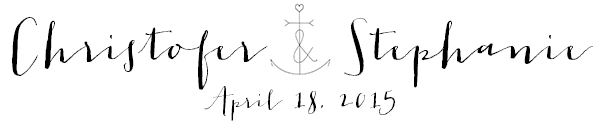
<style>
.page{position:relative;width:600px;height:121px;background:#ffffff}
.page>*{position:absolute;margin:0}
.t1{font:51.6px "JacquesGilles";color:#000000}
.t2{font:25.8px "JacquesGilles";letter-spacing:-0.01em;color:#000000}
</style>
<div class="page">
<p class="t1" style="left:12px;top:17px;width:256px;height:73px">Christofer</p>
<p class="t1" style="left:344px;top:17px;width:249px;height:71px">Stephanie</p>
<p class="t2" style="left:204px;top:86px;width:191px;height:35px">April 18, 2015</p>
</div>
